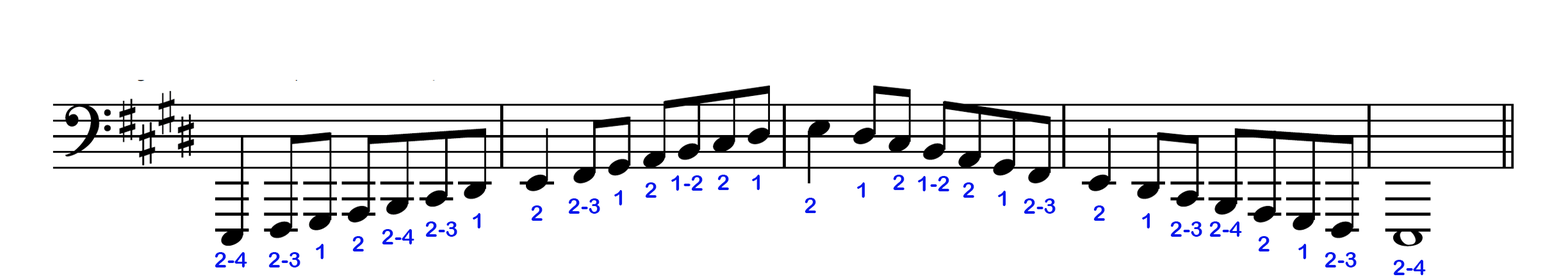
<style>
.page{position:relative;width:1568px;height:279px;background:#ffffff}
.page>*{position:absolute;margin:0}
.t1{font:21.8px "ArialRoundedMTBold";color:#0417ec}
</style>
<div class="page">
<p class="t1" style="left:645px;top:183px;width:12px;height:15px">2</p>
<p class="t1" style="left:671px;top:176px;width:32px;height:15px">1-2</p>
<p class="t1" style="left:717px;top:175px;width:12px;height:15px">2</p>
<p class="t1" style="left:752px;top:175px;width:8px;height:15px">1</p>
<p class="t1" style="left:857px;top:183px;width:8px;height:15px">1</p>
<p class="t1" style="left:893px;top:175px;width:11px;height:15px">2</p>
<p class="t1" style="left:918px;top:176px;width:31px;height:16px">1-2</p>
<p class="t1" style="left:963px;top:183px;width:11px;height:15px">2</p>
<p class="t1" style="left:614px;top:190px;width:9px;height:16px">1</p>
<p class="t1" style="left:804px;top:198px;width:12px;height:15px">2</p>
<p class="t1" style="left:998px;top:191px;width:8px;height:15px">1</p>
<p class="t1" style="left:531px;top:206px;width:12px;height:15px">2</p>
<p class="t1" style="left:568px;top:199px;width:32px;height:15px">2-3</p>
<p class="t1" style="left:1024px;top:199px;width:32px;height:15px">2-3</p>
<p class="t1" style="left:1093px;top:206px;width:12px;height:15px">2</p>
<p class="t1" style="left:425px;top:222px;width:32px;height:15px">2-3</p>
<p class="t1" style="left:473px;top:213px;width:8px;height:16px">1</p>
<p class="t1" style="left:1142px;top:213px;width:8px;height:16px">1</p>
<p class="t1" style="left:1170px;top:222px;width:32px;height:15px">2-3</p>
<p class="t1" style="left:1209px;top:222px;width:33px;height:15px">2-4</p>
<p class="t1" style="left:382px;top:229px;width:32px;height:16px">2-4</p>
<p class="t1" style="left:316px;top:244px;width:8px;height:15px">1</p>
<p class="t1" style="left:352px;top:236px;width:12px;height:16px">2</p>
<p class="t1" style="left:1258px;top:236px;width:12px;height:16px">2</p>
<p class="t1" style="left:1298px;top:244px;width:9px;height:15px">1</p>
<p class="t1" style="left:215px;top:252px;width:32px;height:16px">2-4</p>
<p class="t1" style="left:268px;top:252px;width:32px;height:16px">2-3</p>
<p class="t1" style="left:1325px;top:252px;width:32px;height:16px">2-3</p>
<p class="t1" style="left:1393px;top:260px;width:33px;height:15px">2-4</p>
</div>
